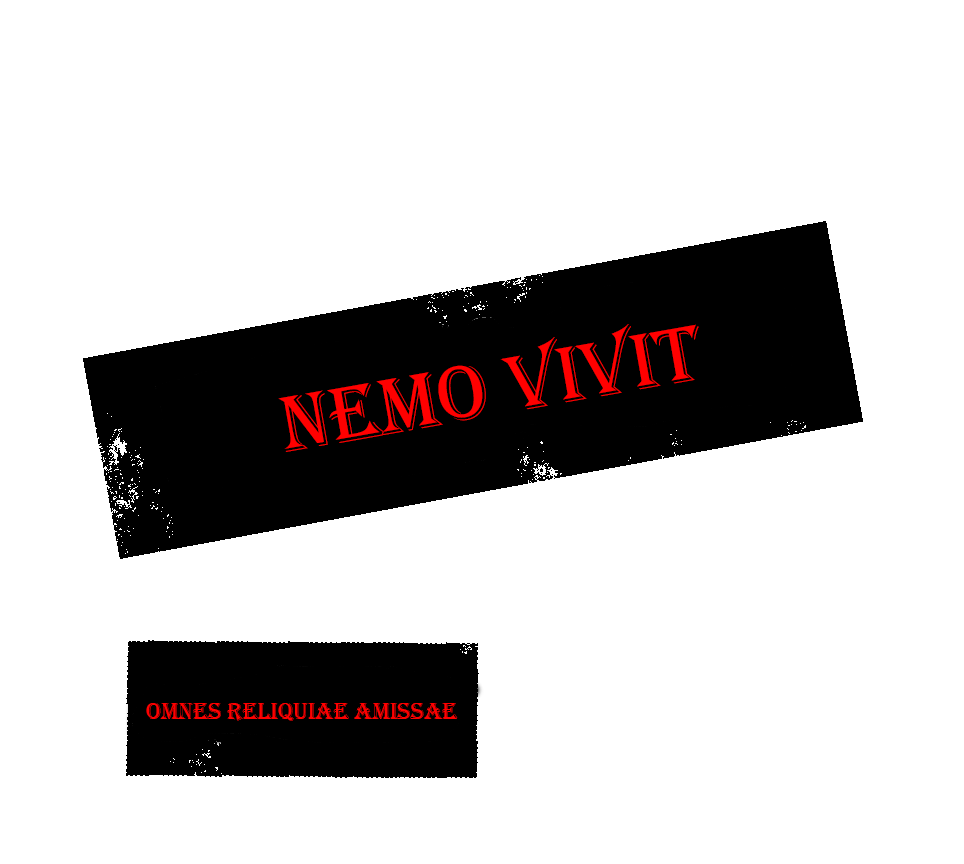
<style>
.page{position:relative;width:964px;height:864px;background:#ffffff}
.page>*{position:absolute;margin:0}
.t1{font:81.3px "Algerian";color:#ff0000}
.t2{font:24px "Algerian";color:#ff0000}
</style>
<div class="page">
<p class="t1" style="left:278px;top:324px;width:421px;height:128px;rotate:-10deg">NEMO VIVIT</p>
<p class="t2" style="left:146px;top:703px;width:312px;height:18px">OMNES RELIQUIAE AMISSAE</p>
</div>
